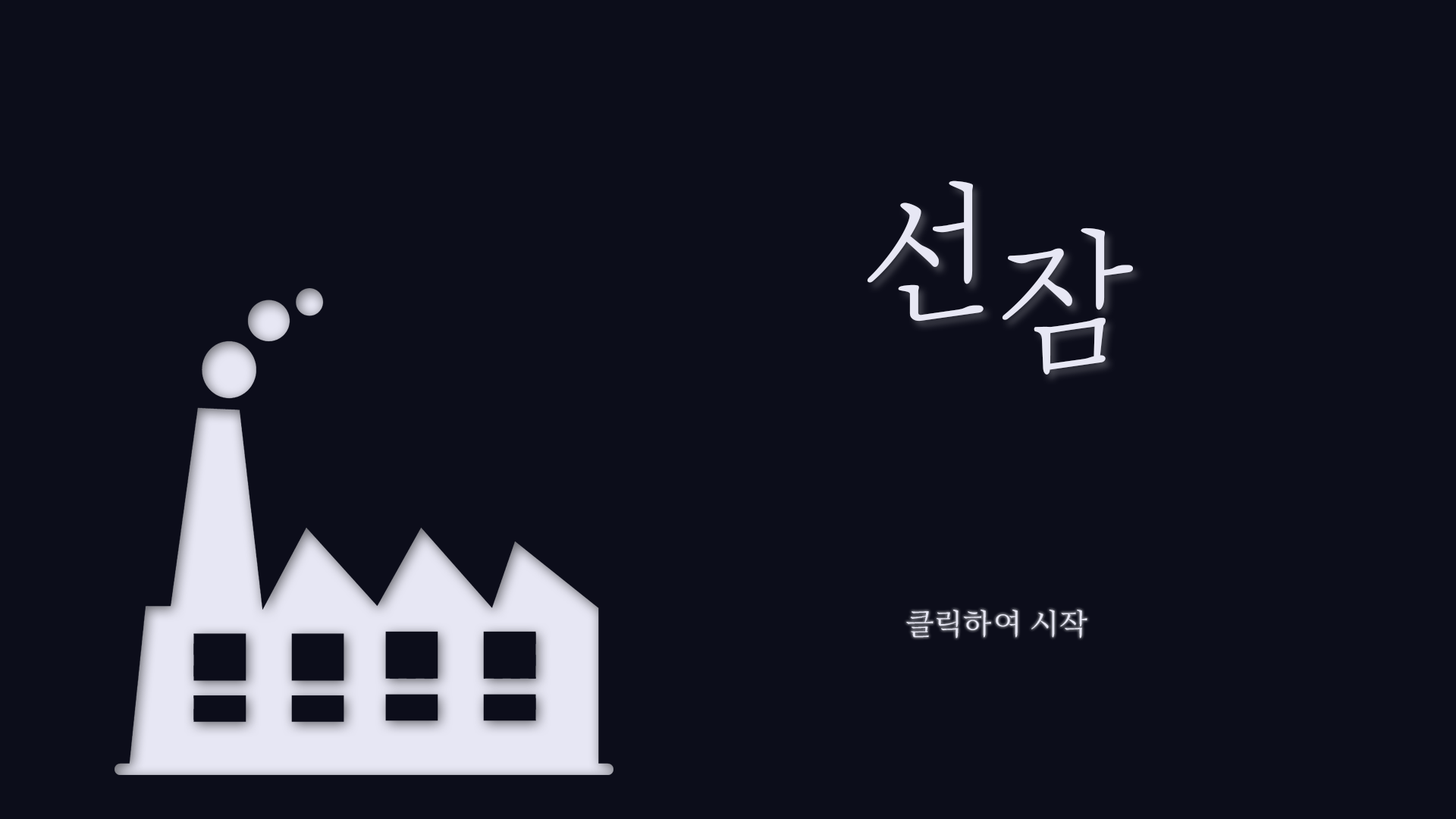
<style>
.page{position:relative;width:1456px;height:819px;background:#0c0d1a}
.page>*{position:absolute;margin:0}
.t1{font:151.7px/45.5px "DXPnM-KSCpc-EUC-H";color:#e7e7f4}
.t2{font:30.3px "Arita-buri-Medium_OTF";letter-spacing:0.025em;color:#e7e7f4}
</style>
<div class="page">
<p class="t1" style="left:867px;top:180px;width:266px;height:195px">선<br>   잠</p>
<p class="t2" style="left:906px;top:610px;width:181px;height:29px">클릭하여 시작</p>
</div>
